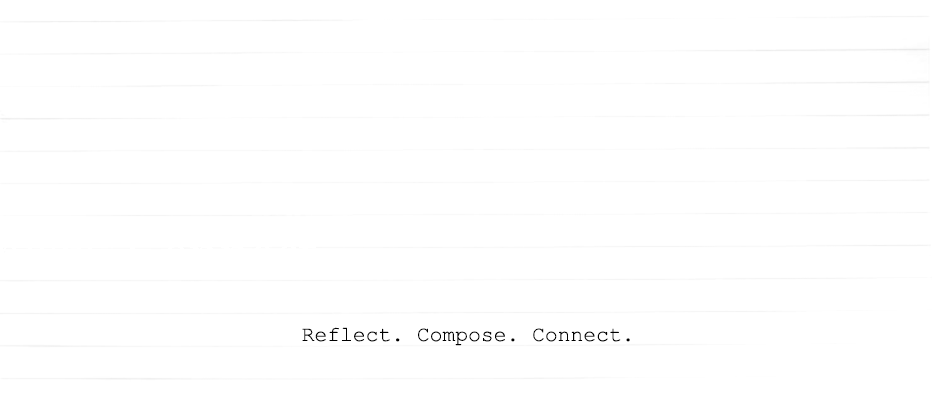
<style>
.page{position:relative;width:932px;height:405px;background:#ffffff}
.page>*{position:absolute;margin:0}
.t1{font:21.3px "CourierNewPSMT";color:#000000}
</style>
<div class="page">
<p class="t1" style="left:302px;top:327px;width:328px;height:19px">Reflect. Compose. Connect.</p>
</div>
